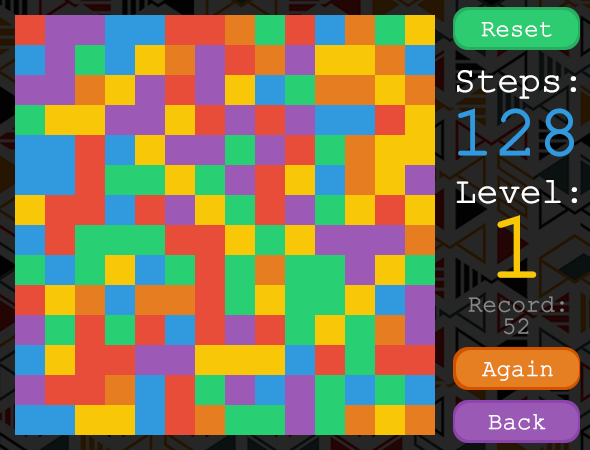
<style>
.page{position:relative;width:590px;height:450px}
.page>*{position:absolute;margin:0}
.t1{font:24px "ERKurierKOI8Normal";color:#ffffff}
.t2{font:36px "ERKurierKOI8Normal";color:#ffffff}
.t3{font:72px "ERKurierKOI8Normal";color:#319ade}
.t4{font:96px "ERKurierKOI8Normal";color:#f7c708}
.t5{font:24px "ERKurierKOI8Normal";color:#888888}
</style>
<div class="page">
<p class="t1" style="left:481px;top:22px;width:71px;height:15px">Reset</p>
<p class="t2" style="left:457px;top:70px;width:119px;height:29px">Steps:</p>
<p class="t3" style="left:458px;top:108px;width:116px;height:49px">128</p>
<p class="t2" style="left:456px;top:180px;width:121px;height:24px">Level:</p>
<p class="t4" style="left:497px;top:215px;width:40px;height:63px">1</p>
<p class="t5" style="left:468px;top:296px;width:96px;height:17px">Record:</p>
<p class="t5" style="left:504px;top:318px;width:25px;height:17px">52</p>
<p class="t1" style="left:482px;top:360px;width:71px;height:21px">Again</p>
<p class="t1" style="left:488px;top:414px;width:58px;height:16px">Back</p>
</div>
